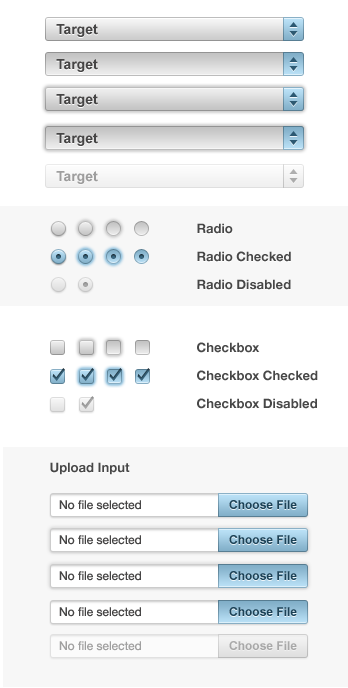
<style>
.page{position:relative;width:348px;height:688px;background:#ffffff}
.page>*{position:absolute;margin:0}
.t1{font:14px "Arial-BoldMT";color:#464545}
.t2{font:14px "Arial-BoldMT";color:#9d9d9d}
.t3{font:13px "HelveticaNeue-Bold";color:#474747}
.t4{font:12px "HelveticaNeue";color:#464545}
.t5{font:12px "Arial-BoldMT";color:#1c4257}
.t6{font:12px "HelveticaNeue";color:#a0a0a0}
.t7{font:12px "Arial-BoldMT";color:#a8a8a8}
</style>
<div class="page">
<p class="t1" style="left:56px;top:24px;width:42px;height:13px">Target</p>
<p class="t1" style="left:56px;top:59px;width:42px;height:13px">Target</p>
<p class="t1" style="left:56px;top:94px;width:42px;height:13px">Target</p>
<p class="t1" style="left:56px;top:133px;width:42px;height:13px">Target</p>
<p class="t2" style="left:56px;top:171px;width:42px;height:13px">Target</p>
<p class="t3" style="left:197px;top:223px;width:36px;height:11px">Radio</p>
<p class="t3" style="left:197px;top:251px;width:94px;height:11px">Radio Checked</p>
<p class="t3" style="left:197px;top:279px;width:94px;height:11px">Radio Disabled</p>
<p class="t3" style="left:197px;top:342px;width:63px;height:11px">Checkbox</p>
<p class="t3" style="left:197px;top:370px;width:121px;height:11px">Checkbox Checked</p>
<p class="t3" style="left:197px;top:398px;width:120px;height:11px">Checkbox Disabled</p>
<p class="t3" style="left:50px;top:462px;width:80px;height:13px">Upload Input</p>
<p class="t4" style="left:59px;top:500px;width:82px;height:10px">No file selected</p>
<p class="t5" style="left:229px;top:500px;width:68px;height:9px">Choose File</p>
<p class="t4" style="left:59px;top:535px;width:82px;height:10px">No file selected</p>
<p class="t5" style="left:229px;top:535px;width:68px;height:9px">Choose File</p>
<p class="t4" style="left:59px;top:571px;width:82px;height:10px">No file selected</p>
<p class="t5" style="left:229px;top:571px;width:68px;height:9px">Choose File</p>
<p class="t4" style="left:59px;top:607px;width:82px;height:10px">No file selected</p>
<p class="t5" style="left:229px;top:607px;width:68px;height:9px">Choose File</p>
<p class="t6" style="left:59px;top:641px;width:82px;height:10px">No file selected</p>
<p class="t7" style="left:229px;top:641px;width:68px;height:9px">Choose File</p>
</div>
